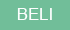
<style>
.page{position:relative;width:70px;height:30px;background:#71be99}
.page>*{position:absolute;margin:0}
.t1{font:16.1px "ArialMT";color:#fdfefe;scale:1.04 1}
</style>
<div class="page">
<p class="t1" style="left:17px;top:8px;width:35px;height:12px">BELI</p>
</div>
